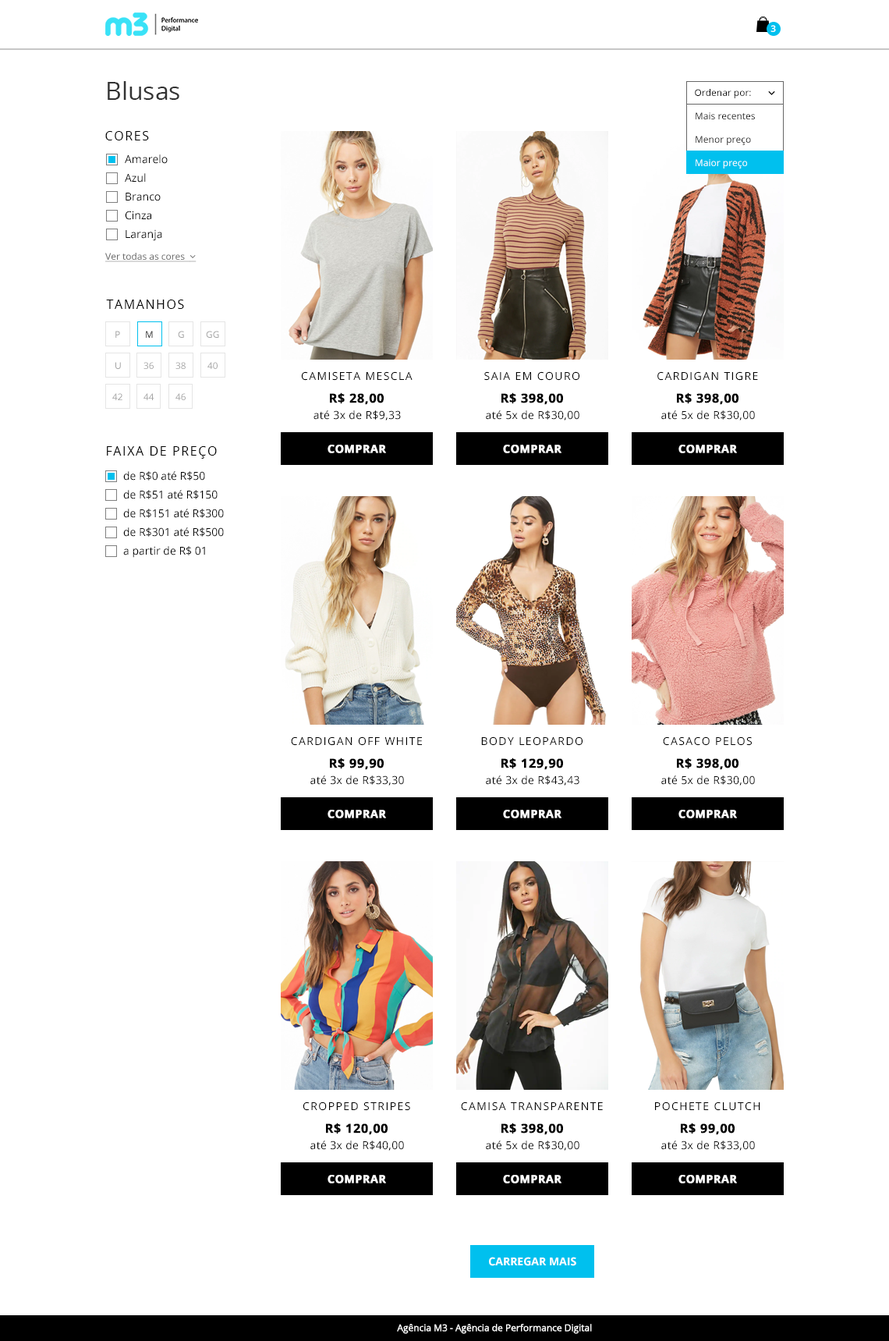
<style>
.page{position:relative;width:889px;height:1341px;background:#ffffff}
.page>*{position:absolute;margin:0}
.t1{font:9.4px "OpenSans-Semibold";color:#ffffff}
.t2{font:25px "OpenSans";color:#333333}
.t3{font:9.4px "OpenSans";color:#000000}
.t4{font:9.4px/23.4px "OpenSans";color:#000000}
.t5{font:9.4px/23.4px "OpenSans";color:#ffffff}
.t6{font:12.5px "OpenSans";letter-spacing:0.1em;color:#000000;text-transform:uppercase}
.t7{font:10.9px/18.7px "OpenSans";color:#000000}
.t8{font:9.4px "OpenSans";text-transform:uppercase}
.t9{font:9.4px "OpenSans";color:#a3a3a3;text-transform:uppercase}
.t10{font:10.9px "OpenSans";letter-spacing:0.1em;color:#000000;text-transform:uppercase}
.t11{font:12.5px "OpenSans-Bold";letter-spacing:0.025em;color:#000000;text-transform:uppercase;font-weight:bold}
.t12{font:10.9px "OpenSans";letter-spacing:0.025em;color:#000000}
.t13{font:10.9px "OpenSans-Bold";letter-spacing:0.025em;color:#ffffff;text-transform:uppercase;font-weight:bold}
.t14{font:10.9px "OpenSans-Bold";color:#ffffff;text-transform:uppercase}
.t15{font:9.4px "OpenSans";color:#ffffff}
</style>
<div class="page">
<p class="t1" style="left:771px;top:25px;width:5px;height:7px">3</p>
<p class="t2" style="left:108px;top:81px;width:71px;height:19px">Blusas</p>
<p class="t3" style="left:695px;top:89px;width:56px;height:9px">Ordenar por:</p>
<p class="t4" style="left:696px;top:112px;width:59px;height:56px">Mais recentes<br>Menor preço<br><span class="t5">Maior preço</span></p>
<p class="t6" style="left:105px;top:131px;width:44px;height:9px">cores</p>
<p class="t7" style="left:125px;top:154px;width:43px;height:87px">Amarelo<br>Azul<br>Branco<br>Cinza<br>Laranja</p>
<p class="t6" style="left:106px;top:300px;width:78px;height:9px">tamanhos</p>
<p class="t8" style="left:115px;top:331px;width:5px;height:7px">p</p>
<p class="t8" style="left:146px;top:331px;width:7px;height:7px">M</p>
<p class="t9" style="left:178px;top:331px;width:6px;height:7px">g</p>
<p class="t9" style="left:206px;top:331px;width:13px;height:7px">gg</p>
<p class="t9" style="left:115px;top:362px;width:6px;height:7px">u</p>
<p class="t9" style="left:144px;top:362px;width:10px;height:7px">36</p>
<p class="t9" style="left:176px;top:362px;width:10px;height:7px">38</p>
<p class="t9" style="left:207px;top:362px;width:11px;height:7px">40</p>
<p class="t10" style="left:301px;top:371px;width:112px;height:10px">camiseta mescla</p>
<p class="t10" style="left:484px;top:371px;width:96px;height:10px">saia em couro</p>
<p class="t10" style="left:658px;top:371px;width:100px;height:10px">cardigan tigre</p>
<p class="t8" style="left:112px;top:393px;width:10px;height:7px">42</p>
<p class="t9" style="left:144px;top:393px;width:10px;height:7px">44</p>
<p class="t8" style="left:176px;top:393px;width:10px;height:7px">46</p>
<p class="t11" style="left:330px;top:392px;width:54px;height:13px">R$ 28,00</p>
<p class="t11" style="left:502px;top:392px;width:61px;height:13px">R$ 398,00</p>
<p class="t11" style="left:677px;top:392px;width:62px;height:13px">R$ 398,00</p>
<p class="t12" style="left:314px;top:410px;width:87px;height:10px">até 3x de R$9,33</p>
<p class="t12" style="left:486px;top:410px;width:94px;height:10px">até 5x de R$30,00</p>
<p class="t12" style="left:661px;top:410px;width:94px;height:10px">até 5x de R$30,00</p>
<p class="t6" style="left:107px;top:446px;width:110px;height:13px">faixa de preço</p>
<p class="t13" style="left:328px;top:445px;width:58px;height:8px">comprar</p>
<p class="t13" style="left:503px;top:445px;width:59px;height:8px">comprar</p>
<p class="t13" style="left:679px;top:445px;width:58px;height:8px">comprar</p>
<p class="t7" style="left:123px;top:471px;width:101px;height:87px">de R$0 até R$50<br>de R$51 até R$150<br>de R$151 até R$300<br>de R$301 até R$500<br>a partir de R$ 01</p>
<p class="t10" style="left:291px;top:736px;width:131px;height:10px">cardigan off white</p>
<p class="t10" style="left:481px;top:736px;width:102px;height:10px">body leopardo</p>
<p class="t10" style="left:663px;top:736px;width:89px;height:10px">casaco pelos</p>
<p class="t11" style="left:330px;top:757px;width:54px;height:13px">R$ 99,90</p>
<p class="t11" style="left:502px;top:757px;width:61px;height:13px">R$ 129,90</p>
<p class="t11" style="left:677px;top:757px;width:62px;height:13px">R$ 398,00</p>
<p class="t12" style="left:310px;top:775px;width:94px;height:11px">até 3x de R$33,30</p>
<p class="t12" style="left:486px;top:775px;width:94px;height:11px">até 3x de R$43,43</p>
<p class="t12" style="left:661px;top:775px;width:94px;height:11px">até 5x de R$30,00</p>
<p class="t13" style="left:328px;top:810px;width:58px;height:8px">comprar</p>
<p class="t13" style="left:503px;top:810px;width:59px;height:8px">comprar</p>
<p class="t13" style="left:679px;top:810px;width:58px;height:8px">comprar</p>
<p class="t10" style="left:303px;top:1101px;width:107px;height:10px">cropped stripes</p>
<p class="t10" style="left:461px;top:1101px;width:142px;height:10px">camisa transparente</p>
<p class="t10" style="left:655px;top:1101px;width:106px;height:10px">pochete clutch</p>
<p class="t11" style="left:326px;top:1123px;width:62px;height:12px">R$ 120,00</p>
<p class="t11" style="left:502px;top:1123px;width:61px;height:12px">R$ 398,00</p>
<p class="t11" style="left:681px;top:1123px;width:54px;height:12px">R$ 99,00</p>
<p class="t12" style="left:310px;top:1140px;width:94px;height:11px">até 3x de R$40,00</p>
<p class="t12" style="left:486px;top:1140px;width:94px;height:11px">até 5x de R$30,00</p>
<p class="t12" style="left:661px;top:1140px;width:94px;height:11px">até 3x de R$33,00</p>
<p class="t13" style="left:328px;top:1175px;width:58px;height:8px">comprar</p>
<p class="t13" style="left:503px;top:1175px;width:59px;height:8px">comprar</p>
<p class="t13" style="left:679px;top:1175px;width:58px;height:8px">comprar</p>
<p class="t14" style="left:489px;top:1257px;width:87px;height:9px">carregar mais</p>
<p class="t15" style="left:397px;top:1324px;width:195px;height:10px">Agência M3 - Agência de Performance Digital</p>
</div>
